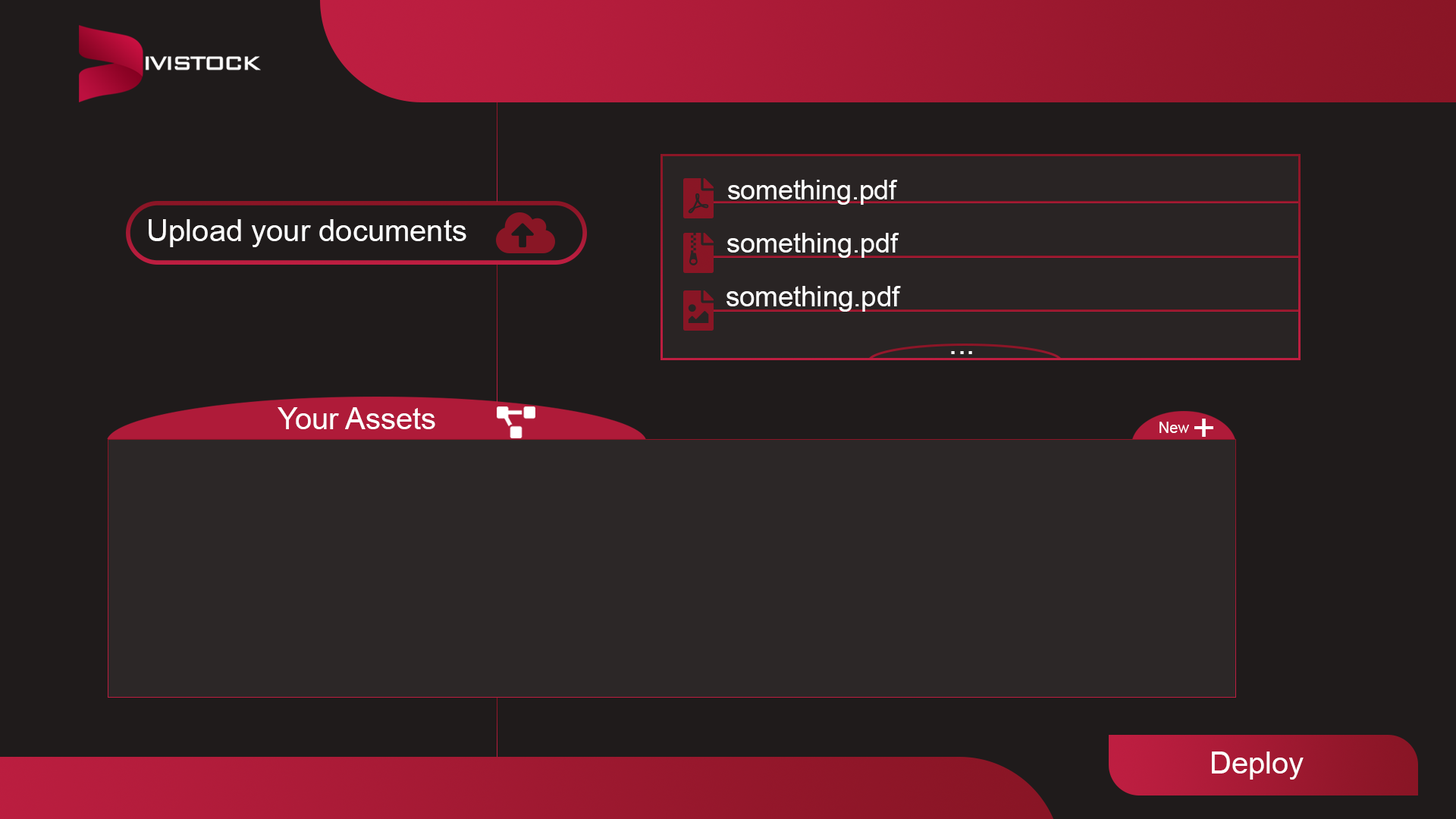
<style>
.page{position:relative;width:1456px;height:819px;background:#1f1b1b}
.page>*{position:absolute;margin:0}
.t1{font:26.9px "ArialMT";color:#ffffff}
.t2{font:30.3px "ArialMT";color:#ffffff}
.t3{font:27.4px "ArialMT";color:#ffffff}
.t4{font:27.7px "ArialMT";color:#ffffff}
.t5{font:15.3px "ArialMT";color:#ffffff}
.t6{font:40.5px "ArialMT";color:#ffffff}
</style>
<div class="page">
<p class="t1" style="left:728px;top:180px;width:170px;height:25px">something.pdf</p>
<p class="t2" style="left:149px;top:219px;width:317px;height:28px">Upload your documents</p>
<p class="t3" style="left:727px;top:233px;width:172px;height:25px">something.pdf</p>
<p class="t4" style="left:726px;top:286px;width:175px;height:26px">something.pdf</p>
<p class="t2" style="left:951px;top:351px;width:21px;height:3px">...</p>
<p class="t2" style="left:278px;top:407px;width:157px;height:22px">Your Assets</p>
<p class="t5" style="left:1159px;top:422px;width:30px;height:11px">New</p>
<p class="t6" style="left:1194px;top:419px;width:19px;height:18px">+</p>
<p class="t2" style="left:1212px;top:751px;width:92px;height:29px">Deploy</p>
</div>
